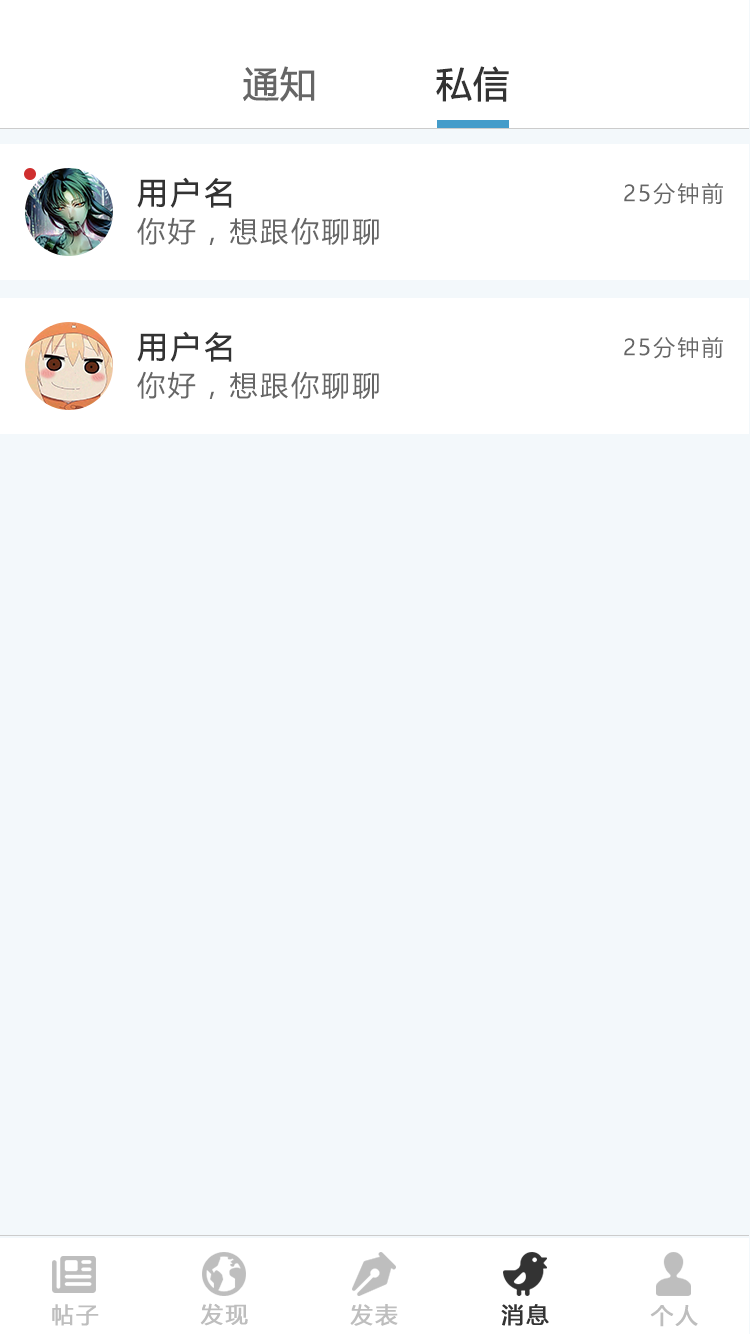
<style>
.page{position:relative;width:750px;height:1334px;background:#f3f8fb}
.page>*{position:absolute;margin:0}
.t1{font:36px "MicrosoftYaHei";color:#666666;font-weight:bold}
.t2{font:36px "MicrosoftYaHei";color:#333333;font-weight:bold}
.t3{font:30px "MicrosoftYaHei";letter-spacing:0.1em;color:#333333;font-weight:bold}
.t4{font:22px "MicrosoftYaHei";letter-spacing:0.1em;color:#666666}
.t5{font:28px "MicrosoftYaHei";letter-spacing:0.1em;color:#666666}
.t6{font:22px "MicrosoftYaHei";letter-spacing:0.1em;color:#bebebe;font-weight:bold}
.t7{font:22px "MicrosoftYaHei";letter-spacing:0.1em;color:#35334a;font-weight:bold}
</style>
<div class="page">
<p class="t1" style="left:243px;top:66px;width:72px;height:36px">通知</p>
<p class="t2" style="left:436px;top:66px;width:73px;height:36px">私信</p>
<p class="t3" style="left:137px;top:177px;width:95px;height:31px">用户名</p>
<p class="t4" style="left:624px;top:182px;width:99px;height:23px">25分钟前</p>
<p class="t5" style="left:137px;top:217px;width:242px;height:28px">你好，想跟你聊聊</p>
<p class="t3" style="left:137px;top:331px;width:95px;height:31px">用户名</p>
<p class="t4" style="left:624px;top:336px;width:99px;height:23px">25分钟前</p>
<p class="t5" style="left:137px;top:371px;width:242px;height:28px">你好，想跟你聊聊</p>
<p class="t6" style="left:52px;top:1304px;width:47px;height:22px">帖子</p>
<p class="t6" style="left:200px;top:1303px;width:48px;height:23px">发现</p>
<p class="t6" style="left:350px;top:1304px;width:48px;height:22px">发表</p>
<p class="t7" style="left:501px;top:1304px;width:48px;height:22px">消息</p>
<p class="t6" style="left:650px;top:1305px;width:48px;height:22px">个人</p>
</div>
